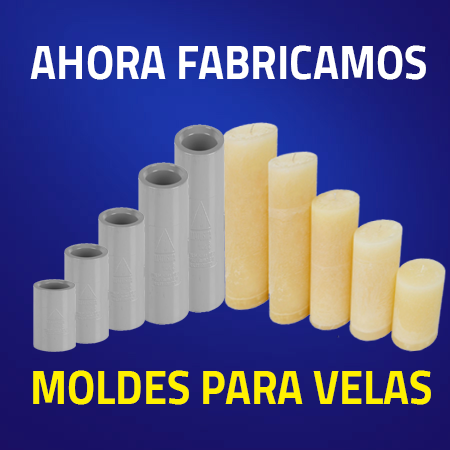
<style>
.page{position:relative;width:450px;height:450px}
.page>*{position:absolute;margin:0}
.t1{font:48px "Cairo-Bold";color:#ffffff;scale:0.9 1}
.t2{font:48px "Cairo-Bold";color:#fff000;scale:0.9 1}
</style>
<div class="page">
<p class="t1" style="left:30px;top:45px;width:396px;height:35px">AHORA FABRICAMOS</p>
<p class="t2" style="left:33px;top:370px;width:398px;height:35px">MOLDES PARA VELAS</p>
</div>
